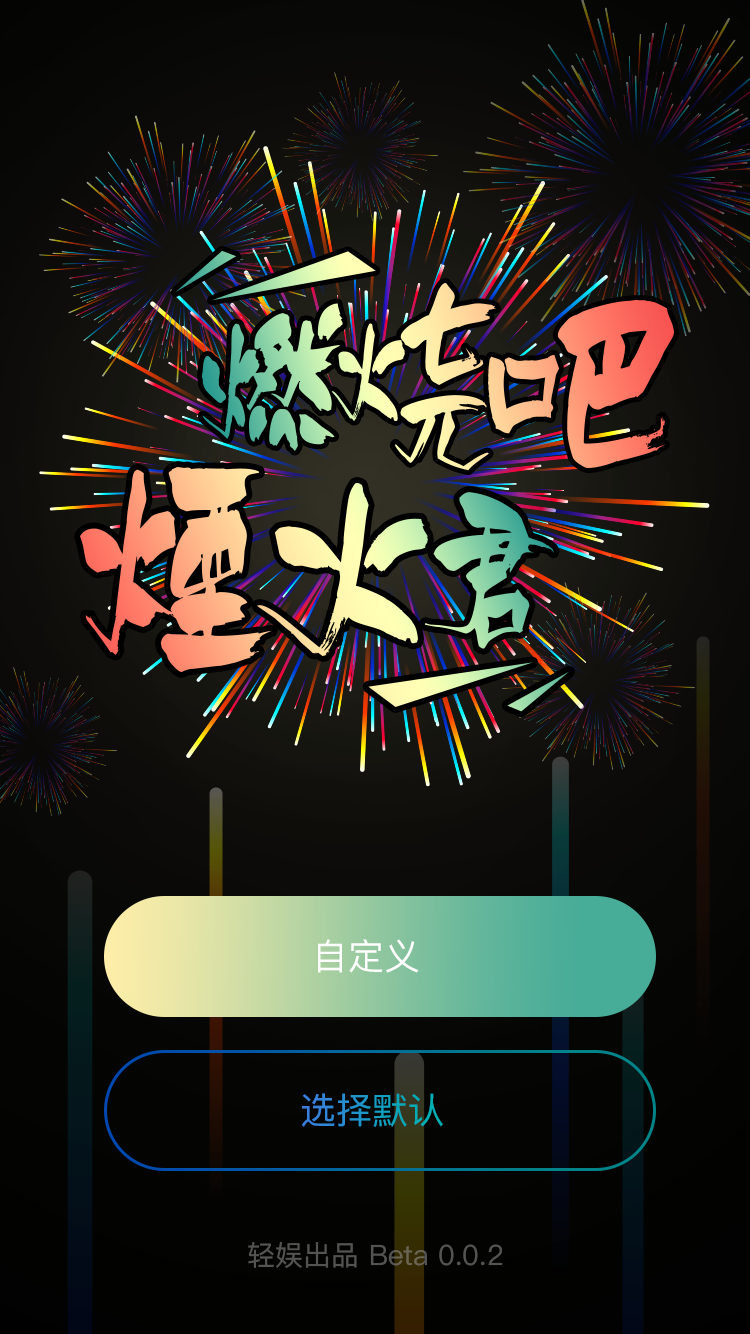
<style>
.page{position:relative;width:750px;height:1334px}
.page>*{position:absolute;margin:0}
.t1{font:36px "PingFangSC-Regular";color:#ffffff;text-transform:uppercase}
.t2{font:36px "PingFangSC-Regular";text-transform:uppercase}
.t3{font:28px "PingFangSC-Regular";color:#535353}
.t4{font:28px "PingFangSC-Regular";color:#535353;text-transform:uppercase}
</style>
<div class="page">
<p class="t1" style="left:318px;top:939px;width:101px;height:34px">自定义</p>
<p class="t2" style="left:302px;top:1093px;width:141px;height:34px">选择默认</p>
<p class="t3" style="left:248px;top:1241px;width:255px;height:27px"><span class="t4">轻娱出品 </span>Beta 0.0.2</p>
</div>
